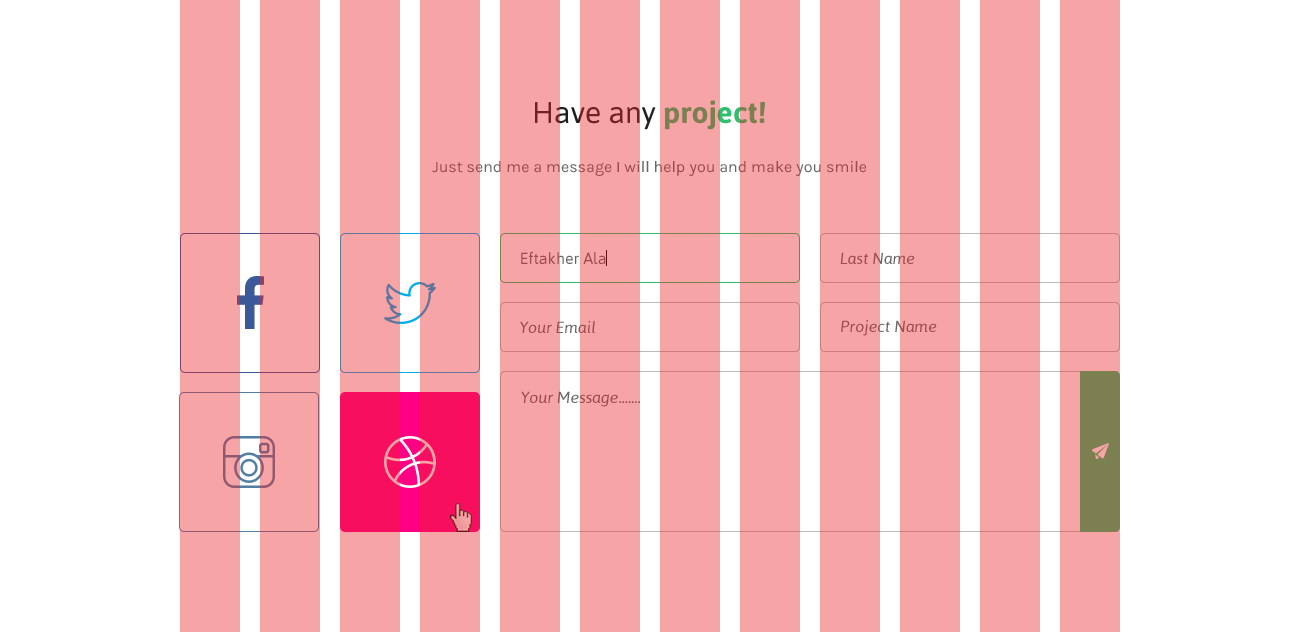
<style>
.page{position:relative;width:1300px;height:632px;background:#f7a4a6}
.page>*{position:absolute;margin:0}
.t1{font:30px "Asap-Regular"}
.t2{font:30px "Asap-Bold"}
.t3{font:16px "Karla-Regular";color:#9d4a4c}
.t4{font:16px "Asap-Regular";color:#9d4a4c}
.t5{font:16px "Asap-Italic"}
.t6{font:16px "Asap-Italic";color:#9d4a4c}
</style>
<div class="page">
<p class="t1" style="left:535px;top:100px;width:231px;height:30px">Have any <span class="t2">project!</span></p>
<p class="t3" style="left:432px;top:161px;width:434px;height:15px">Just send me a message I will help you and make you smile</p>
<p class="t4" style="left:521px;top:251px;width:85px;height:13px">Eftakher Ala</p>
<p class="t5" style="left:840px;top:252px;width:75px;height:12px">Last Name</p>
<p class="t6" style="left:520px;top:321px;width:75px;height:12px">Your Email</p>
<p class="t6" style="left:841px;top:320px;width:96px;height:16px">Project Name</p>
<p class="t6" style="left:521px;top:391px;width:119px;height:16px">Your Message.......</p>
</div>
